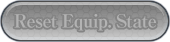
<style>
.page{position:relative;width:170px;height:42px}
.page>*{position:absolute;margin:0}
.t1{font:18px "RyuminPro-ExBold";letter-spacing:-0.04em;color:#b3b3b3}
</style>
<div class="page">
<p class="t1" style="left:14px;top:14px;width:142px;height:17px">Reset Equip. State</p>
</div>
